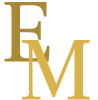
<style>
.page{position:relative;width:98px;height:100px;background:#ffffff}
.page>*{position:absolute;margin:0}
.t1{font:90px "FrankRuhlHofshi-Regular";color:#a98936}
.t2{font:90px "FrankRuhlHofshi-Regular";color:#d9b24a}
</style>
<div class="page">
<p class="t1" style="left:4px;top:2px;width:46px;height:60px">E</p>
<p class="t2" style="left:22px;top:40px;width:68px;height:60px">M</p>
</div>
